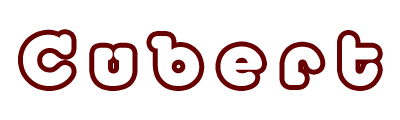
<style>
.page{position:relative;width:400px;height:120px;background:#ffffff}
.page>*{position:absolute;margin:0}
.t1{font:68px "MelodBold";color:#ffffff}
</style>
<div class="page">
<p class="t1" style="left:23px;top:34px;width:355px;height:52px">C u b e r t</p>
</div>
